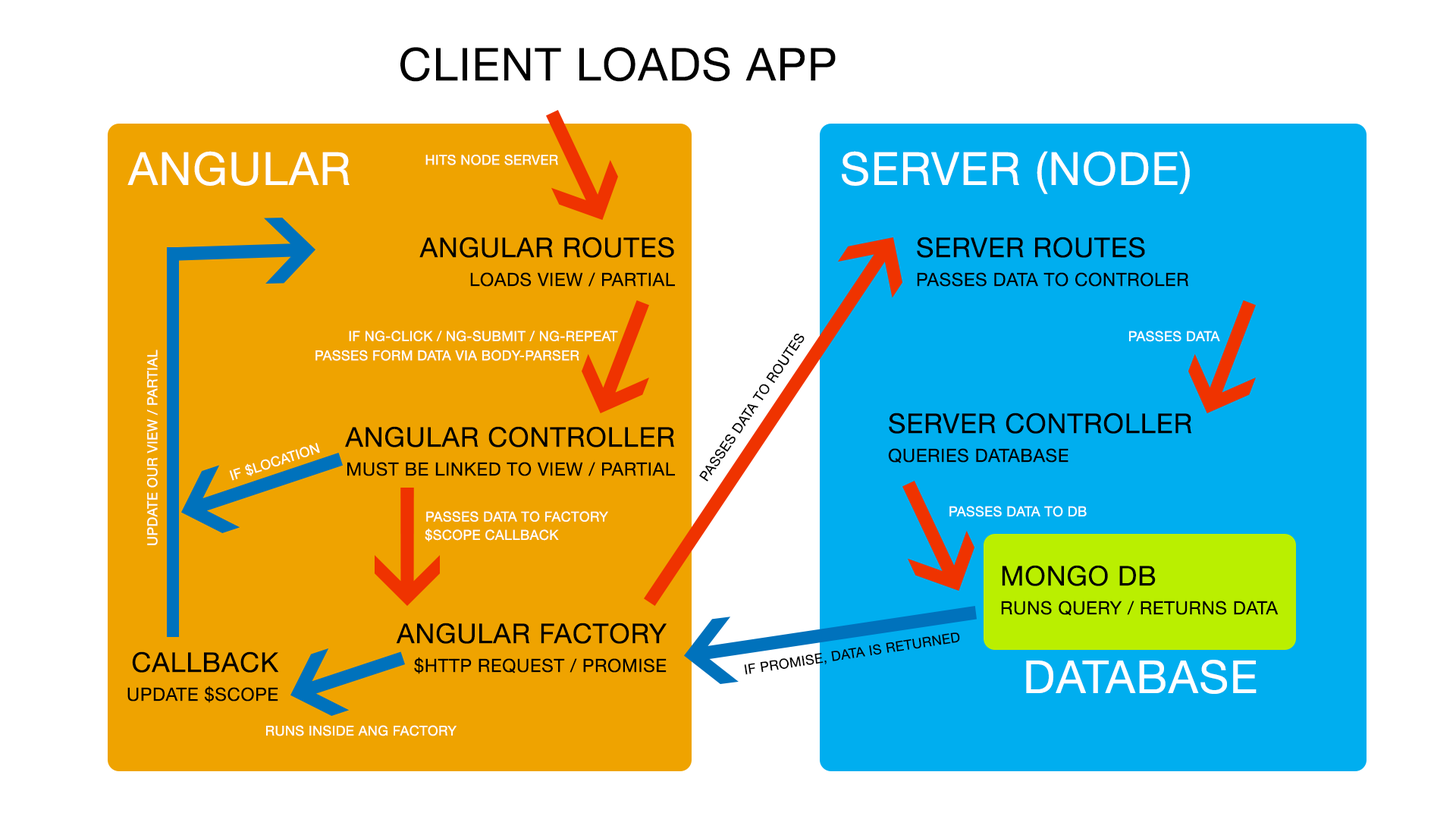
<style>
.page{position:relative;width:1456px;height:819px;background:#ffffff}
.page>*{position:absolute;margin:0}
.t1{font:45.5px "HelveticaNeue";letter-spacing:0.025em;color:#000000}
.t2{font:45.5px "HelveticaNeue";letter-spacing:0.025em;color:#ffffff}
.t3{font:13.6px "HelveticaNeue";letter-spacing:0.025em;color:#ffffff}
.t4{font:18.2px/28.8px "HelveticaNeue";letter-spacing:0.025em;color:#000000}
.t5{font:27.3px/28.8px "HelveticaNeue";letter-spacing:0.025em;color:#000000}
.t6{font:13.6px "HelveticaNeue";letter-spacing:0.025em;color:#000000}
.t7{font:13.6px "HelveticaNeue";letter-spacing:0.025em;color:#fefefe}
</style>
<div class="page">
<p class="t1" style="left:400px;top:47px;width:436px;height:35px">CLIENT LOADS APP</p>
<p class="t2" style="left:127px;top:151px;width:223px;height:35px">ANGULAR</p>
<p class="t3" style="left:425px;top:155px;width:133px;height:10px">HITS NODE SERVER</p>
<p class="t2" style="left:842px;top:151px;width:348px;height:43px">SERVER (NODE)</p>
<p class="t4" style="left:419px;top:237px;width:256px;height:50px;text-align:right"><span class="t5">ANGULAR ROUTES<br></span>LOADS VIEW / PARTIAL</p>
<p class="t4" style="left:917px;top:237px;width:271px;height:50px"><span class="t5">SERVER ROUTES<br></span>PASSES DATA TO CONTROLER</p>
<p class="t3" style="left:349px;top:331px;width:269px;height:10px">IF NG-CLICK / NG-SUBMIT / NG-REPEAT</p>
<p class="t6" style="left:699px;top:334px;width:106px;height:148px;rotate:-56deg">PASSES DATA TO ROUTES</p>
<p class="t3" style="left:1129px;top:331px;width:91px;height:11px">PASSES DATA</p>
<p class="t3" style="left:147px;top:350px;width:11px;height:195px;rotate:-90deg">UPDATE OUR VIEW / PARTIAL</p>
<p class="t3" style="left:315px;top:350px;width:264px;height:11px">PASSES FORM DATA VIA BODY-PARSER</p>
<p class="t5" style="left:888px;top:413px;width:304px;height:50px">SERVER CONTROLLER<br><span class="t4">QUERIES DATABASE</span></p>
<p class="t4" style="left:345px;top:426px;width:330px;height:50px;text-align:right"><span class="t5">ANGULAR CONTROLLER<br></span>MUST BE LINKED TO VIEW / PARTIAL</p>
<p class="t3" style="left:229px;top:443px;width:91px;height:38px;rotate:-18deg">IF $LOCATION</p>
<p class="t3" style="left:949px;top:506px;width:138px;height:11px">PASSES DATA TO DB</p>
<p class="t3" style="left:426px;top:511px;width:182px;height:11px">PASSES DATA TO FACTORY</p>
<p class="t7" style="left:425px;top:529px;width:134px;height:12px">$SCOPE CALLBACK</p>
<p class="t4" style="left:1001px;top:565px;width:278px;height:51px"><span class="t5">MONGO DB<br></span>RUNS QUERY / RETURNS DATA</p>
<p class="t4" style="left:396px;top:623px;width:271px;height:51px;text-align:right"><span class="t5">ANGULAR FACTORY<br></span>$HTTP REQUEST / PROMISE</p>
<p class="t6" style="left:744px;top:632px;width:216px;height:43px;rotate:-9deg">IF PROMISE, DATA IS RETURNED</p>
<p class="t4" style="left:127px;top:651px;width:152px;height:52px;text-align:right"><span class="t5">CALLBACK<br></span>UPDATE $SCOPE</p>
<p class="t2" style="left:1026px;top:660px;width:231px;height:34px">DATABASE</p>
<p class="t3" style="left:266px;top:725px;width:191px;height:11px">RUNS INSIDE ANG FACTORY</p>
</div>
